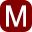
<style>
.page{position:relative;width:32px;height:32px;background:#820000}
.page>*{position:absolute;margin:0}
.t1{font:28.9px "ArialMT";color:#ffffff}
</style>
<div class="page">
<p class="t1" style="left:6px;top:5px;width:20px;height:22px">M</p>
</div>
